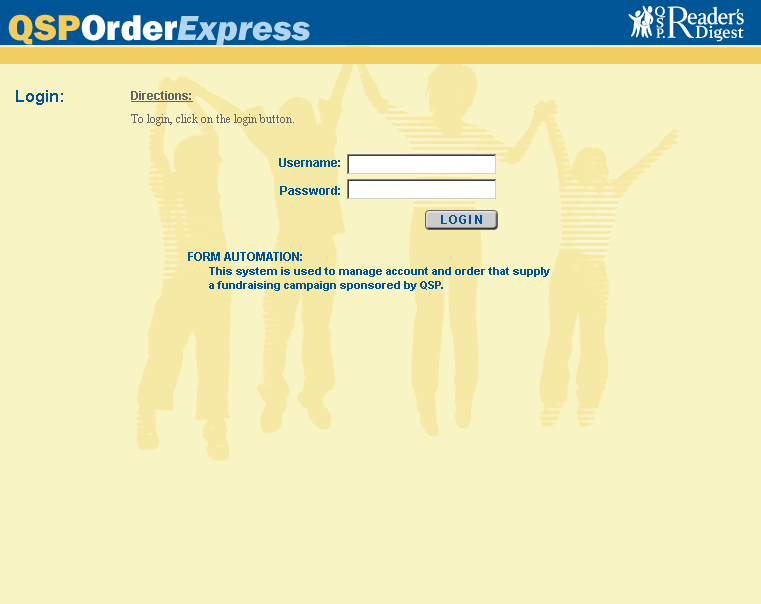
<style>
.page{position:relative;width:761px;height:604px;background:#f8f4c3}
.page>*{position:absolute;margin:0}
.t1{font:36px "FranklinGothic-HeavyItal";color:#b1d5f0}
.t2{font:36px "FranklinGothic-Heavy";color:#f3cc60}
.t3{font:36px "FranklinGothic-Heavy";color:#ffffff}
.t4{font:16px "Arial-BoldMT";color:#005596}
.t5{font:12px/14px "TimesNewRomanPSMT";color:#666666}
.t6{font:12px/9px "Arial-BoldMT";color:#666666;text-decoration:underline}
.t7{font:12px/14px "Arial-BoldMT";color:#005596}
.t8{font:12px "Arial-BoldMT";letter-spacing:0.06em;color:#005596}
.t9{font:12px "Arial-BoldMT";letter-spacing:0.09em;color:#005596}
.t10{font:12px "Arial-BoldMT";letter-spacing:0.12em;color:#005596}
.t11{font:11px/14px "Arial-BoldMT";color:#005596}
.t12{font:12px/9px "Arial-BoldMT";color:#005596}
</style>
<div class="page">
<p class="t1" style="left:8px;top:14px;width:302px;height:32px"><span class="t2">QSP</span><span class="t3">Order</span>Express</p>
<p class="t4" style="left:16px;top:90px;width:47px;height:15px">Login:</p>
<p class="t5" style="left:131px;top:91px;width:163px;height:35px"><span class="t6">Directions:<br><br></span>To login, click on the login button.</p>
<p class="t7" style="left:279px;top:158px;width:61px;height:37px;text-align:right">Username:<br><br>Password:</p>
<p class="t8" style="left:441px;top:215px;width:41px;height:9px">LO<span class="t9">G</span><span class="t10">IN</span></p>
<p class="t11" style="left:188px;top:252px;width:362px;height:39px"><span class="t12">FORM AUTOMATION:<br>       </span>This system is used to manage account and order that supply <br>       a fundraising campaign sponsored by QSP.</p>
</div>
